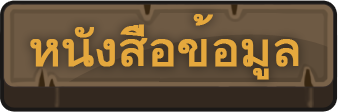
<style>
.page{position:relative;width:338px;height:112px}
.page>*{position:absolute;margin:0}
.t1{font:48.6px "Loma";letter-spacing:-0.025em;color:#e5a83d;text-transform:uppercase;font-weight:bold}
</style>
<div class="page">
<p class="t1" style="left:30px;top:14px;width:269px;height:66px">หนังสือข้อมูล</p>
</div>
